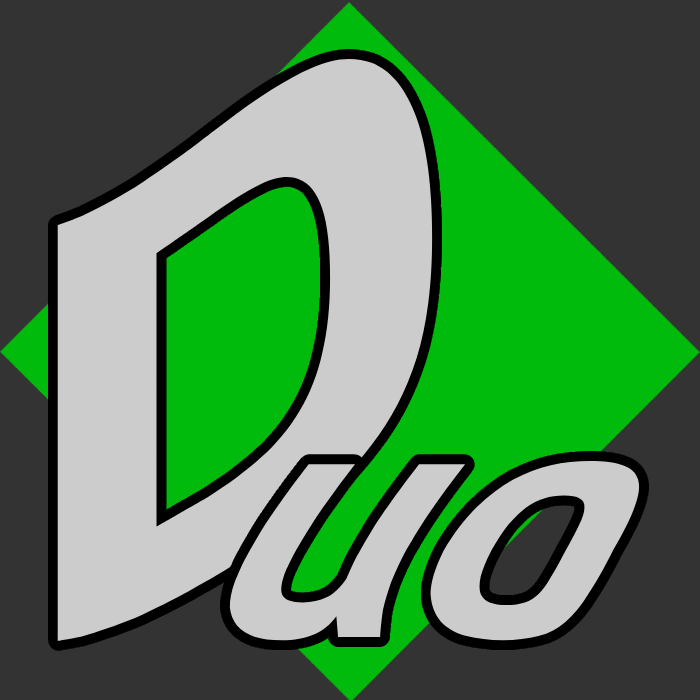
<style>
.page{position:relative;width:700px;height:700px;background:#333333}
.page>*{position:absolute;margin:0}
.t1{font:650px "AlibabaPuHuiTi-Bold";color:#cccccc}
.t2{font:320px "AlibabaPuHuiTi-Bold";color:#cccccc}
</style>
<div class="page">
<p class="t1" style="left:57px;top:58px;width:376px;height:583px">D</p>
<p class="t2" style="left:229px;top:461px;width:412px;height:180px">uo</p>
</div>
